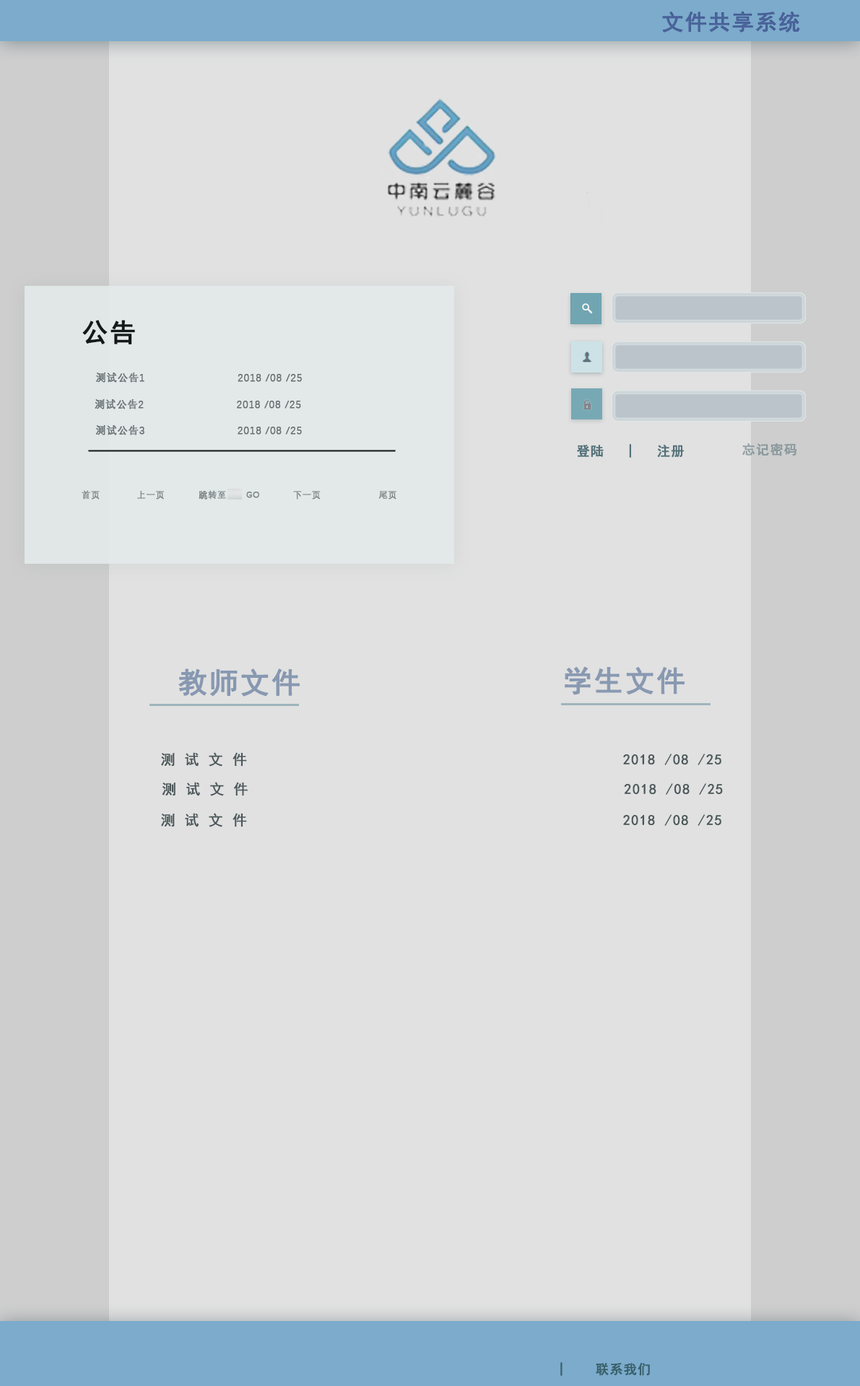
<style>
.page{position:relative;width:860px;height:1386px;background:#e1e1e1}
.page>*{position:absolute;margin:0}
.t1{font:21.7px "SimHei";letter-spacing:0.05em;color:#4b649c;font-weight:bold}
.t2{font:26px "SimHei";letter-spacing:0.05em;color:#13191a;font-weight:bold}
.t3{font:10.1px "DengXian-Regular";letter-spacing:0.05em;color:#677072;font-weight:bold}
.t4{font:13px "SimHei";letter-spacing:0.05em;color:#53727a;font-weight:bold}
.t5{font:13px "SimHei";letter-spacing:0.05em;color:#8a999d;font-weight:bold}
.t6{font:8.7px "DengXian-Regular";letter-spacing:0.05em;color:#7e8789;font-weight:bold}
.t7{font:28.9px "SimHei";letter-spacing:0.05em;color:#8798b1;font-weight:bold}
.t8{font:28.9px "SimHei";letter-spacing:0.05em;color:#8999b2;font-weight:bold}
.t9{font:14.4px "SimHei";letter-spacing:0.05em;color:#4b5759;font-weight:bold}
.t10{font:13px "SimHei";letter-spacing:0.05em;color:#38606a;font-weight:bold}
</style>
<div class="page">
<p class="t1" style="left:662px;top:11px;width:138px;height:21px">文件共享系统</p>
<p class="t2" style="left:82px;top:320px;width:53px;height:24px">公告</p>
<p class="t3" style="left:96px;top:373px;width:206px;height:10px">测试公告1                          2018 /08 /25</p>
<p class="t3" style="left:95px;top:399px;width:206px;height:10px">测试公告2                          2018 /08 /25</p>
<p class="t3" style="left:95px;top:425px;width:207px;height:10px">测试公告3                          2018 /08 /25</p>
<p class="t4" style="left:577px;top:444px;width:107px;height:14px">登陆   |   注册</p>
<p class="t5" style="left:742px;top:443px;width:55px;height:13px">忘记密码</p>
<p class="t6" style="left:82px;top:490px;width:18px;height:10px">首页</p>
<p class="t6" style="left:137px;top:491px;width:27px;height:9px">上一页</p>
<p class="t6" style="left:246px;top:492px;width:13px;height:6px">GO</p>
<p class="t6" style="left:293px;top:491px;width:28px;height:9px">下一页</p>
<p class="t6" style="left:378px;top:491px;width:18px;height:9px">尾页</p>
<p class="t7" style="left:178px;top:669px;width:122px;height:28px">教师文件</p>
<p class="t8" style="left:565px;top:667px;width:120px;height:28px">学生文件</p>
<p class="t9" style="left:161px;top:752px;width:560px;height:15px">测 试 文 件                                             2018 /08 /25</p>
<p class="t9" style="left:162px;top:782px;width:561px;height:15px">测 试 文 件                                             2018 /08 /25</p>
<p class="t9" style="left:161px;top:813px;width:560px;height:15px">测 试 文 件                                             2018 /08 /25</p>
<p class="t10" style="left:560px;top:1363px;width:90px;height:13px">|    联系我们</p>
</div>
